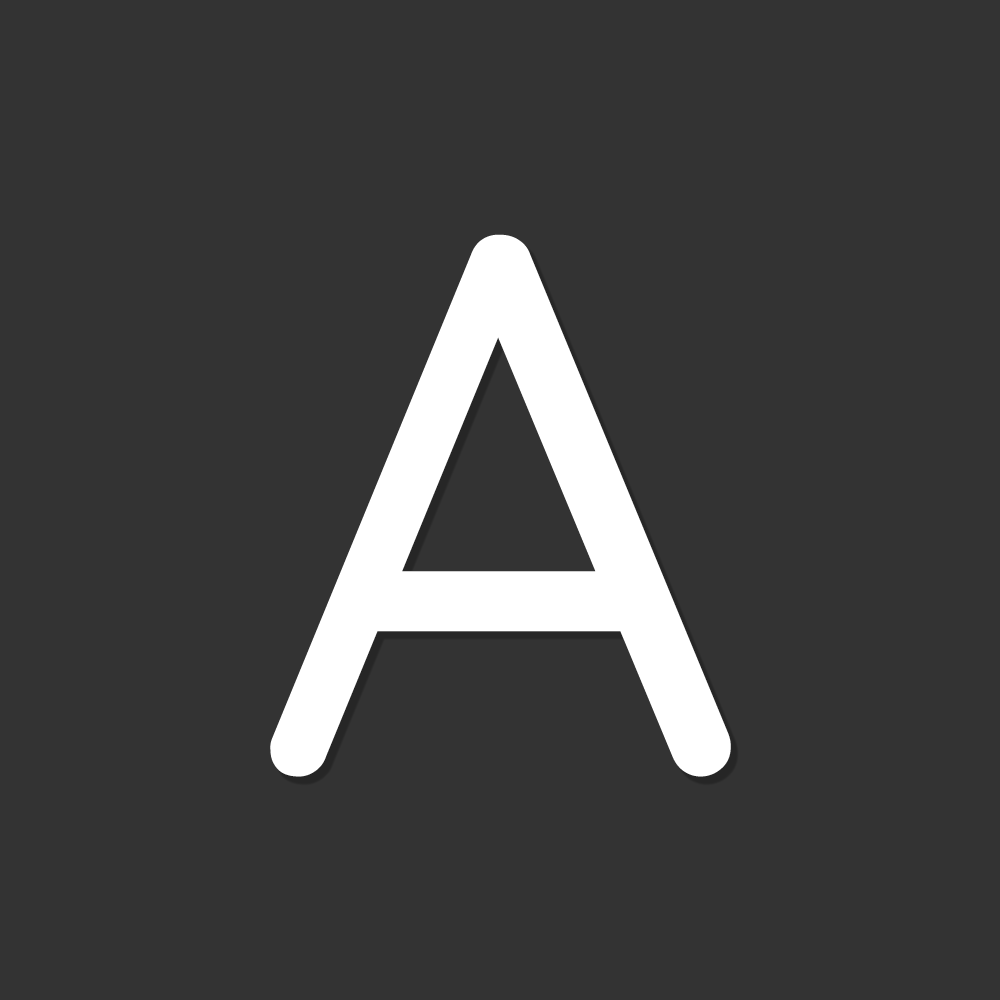
<style>
.page{position:relative;width:1000px;height:1000px;background:#333333}
.page>*{position:absolute;margin:0}
.t1{font:768px "Quicksand-Medium";color:#ffffff}
</style>
<div class="page">
<p class="t1" style="left:270px;top:234px;width:461px;height:543px">A</p>
</div>
